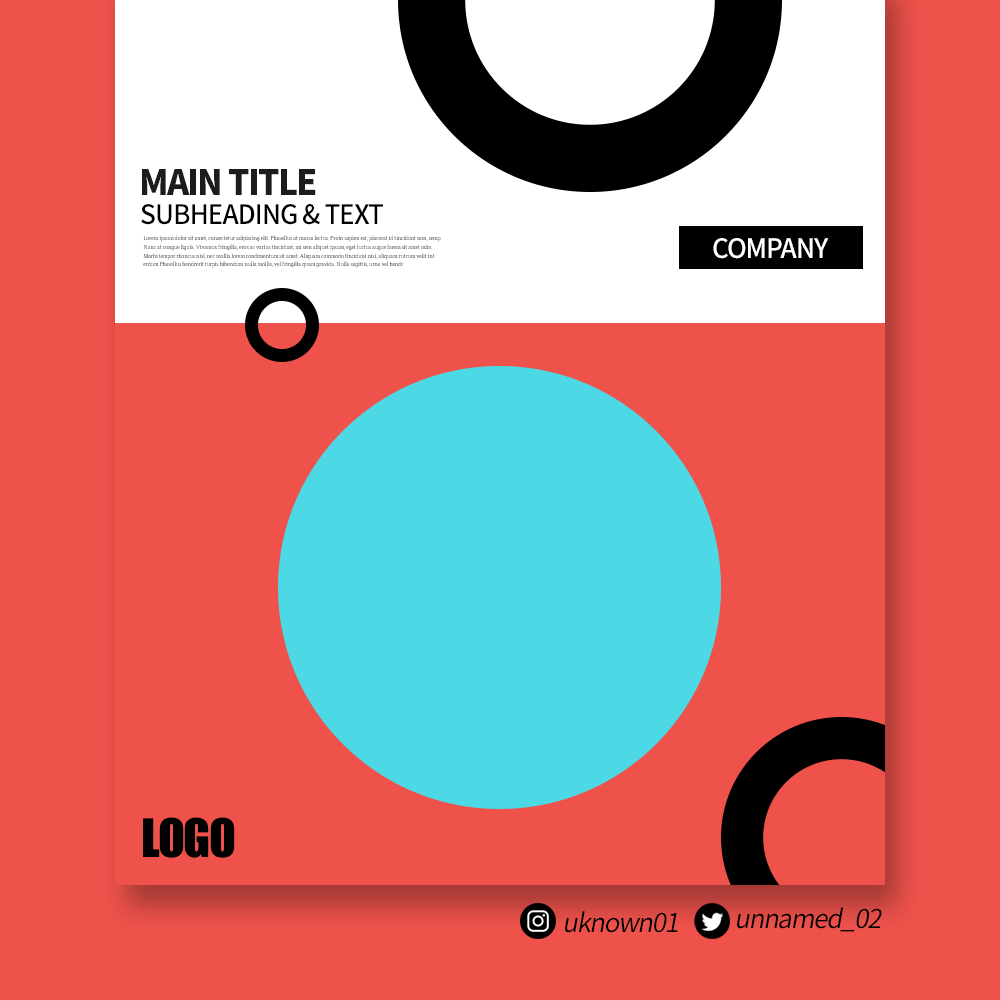
<style>
.page{position:relative;width:1000px;height:1000px;background:#ee524b}
.page>*{position:absolute;margin:0}
.t1{font:35px "SourceHanSansKR-Heavy";letter-spacing:-0.05em;color:#1c1c1c;scale:0.96 1}
.t2{font:27px "SourceHanSansKR-Medium";letter-spacing:-0.038em;color:#000000;scale:0.96 1}
.t3{font:5.9px/8.7px "IropkeBatangM";letter-spacing:-0.04em}
.t4{font:27px "SourceHanSansKR-Medium";letter-spacing:-0.038em;color:#ffffff;scale:0.96 1}
.t5{font:49px "Impact";letter-spacing:-0.025em;color:#000000}
.t6{font:26px "SourceHanSansKR-Normal";letter-spacing:-0.05em;color:#000000;font-style:italic}
</style>
<div class="page">
<p class="t1" style="left:142px;top:169px;width:174px;height:26px">MAIN TITLE</p>
<p class="t2" style="left:141px;top:204px;width:242px;height:21px">SUBHEADING &amp; TEXT</p>
<p class="t3" style="left:143px;top:235px;width:298px;height:33px">Lorem ipsum dolor sit amet, consectetur adipiscing elit. Phasellus at massa lectus. Proin sapien est, placerat id tincidunt non, semp <br>Nunc at congue ligula. Vivamus fringilla, eros ac varius tincidunt, mi sem aliquet ipsum, eget luctus augue lorem sit amet odio. <br>Morbi tempor rhoncus nisl, nec mollis lorem condimentum sit amet. Aliquam commodo tincidunt nisi, aliquam rutrum velit int<br>erdum Phasellus hendrerit turpis bibendum nulla mollis, vel fringilla quam gravida. Nulla sagittis, urna vel hendr</p>
<p class="t4" style="left:713px;top:238px;width:116px;height:21px">COMPANY</p>
<p class="t5" style="left:143px;top:817px;width:92px;height:41px">LOGO</p>
<p class="t6" style="left:565px;top:911px;width:113px;height:22px">uknown01</p>
<p class="t6" style="left:737px;top:907px;width:145px;height:25px">unnamed_02</p>
</div>
